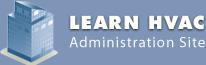
<style>
.page{position:relative;width:206px;height:65px;background:#7e95b7}
.page>*{position:absolute;margin:0}
.t1{font:18px "FuturistExtrabold";letter-spacing:0.06em;color:#fdfbf8}
.t2{font:15px "MyriadPro-Regular";letter-spacing:0.06em;color:#fdfbf8}
</style>
<div class="page">
<p class="t1" style="left:70px;top:15px;width:68px;height:14px">LEARN</p>
<p class="t1" style="left:149px;top:15px;width:55px;height:15px">HVAC</p>
<p class="t2" style="left:69px;top:36px;width:136px;height:12px">Administration Site</p>
</div>
